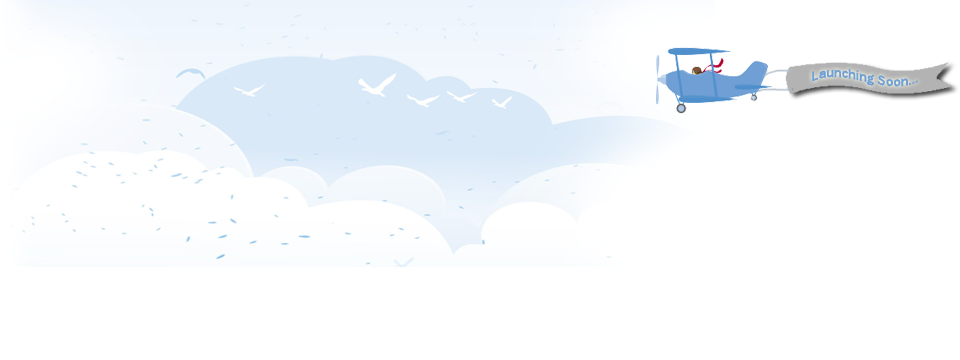
<style>
.page{position:relative;width:960px;height:360px;background:#ffffff}
.page>*{position:absolute;margin:0}
.t1{font:14.1px "FranklinGothic-Medium";color:#709fd3}
</style>
<div class="page">
<p class="t1" style="left:812px;top:68px;width:106px;height:19px">Launching Soon...</p>
</div>
